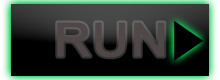
<style>
.page{position:relative;width:220px;height:80px;background:#000000}
.page>*{position:absolute;margin:0}
.t1{font:46.7px "ArialMT";color:#504747;font-weight:bold;scale:1.1 1}
</style>
<div class="page">
<p class="t1" style="left:57px;top:22px;width:108px;height:36px">RUN</p>
</div>
